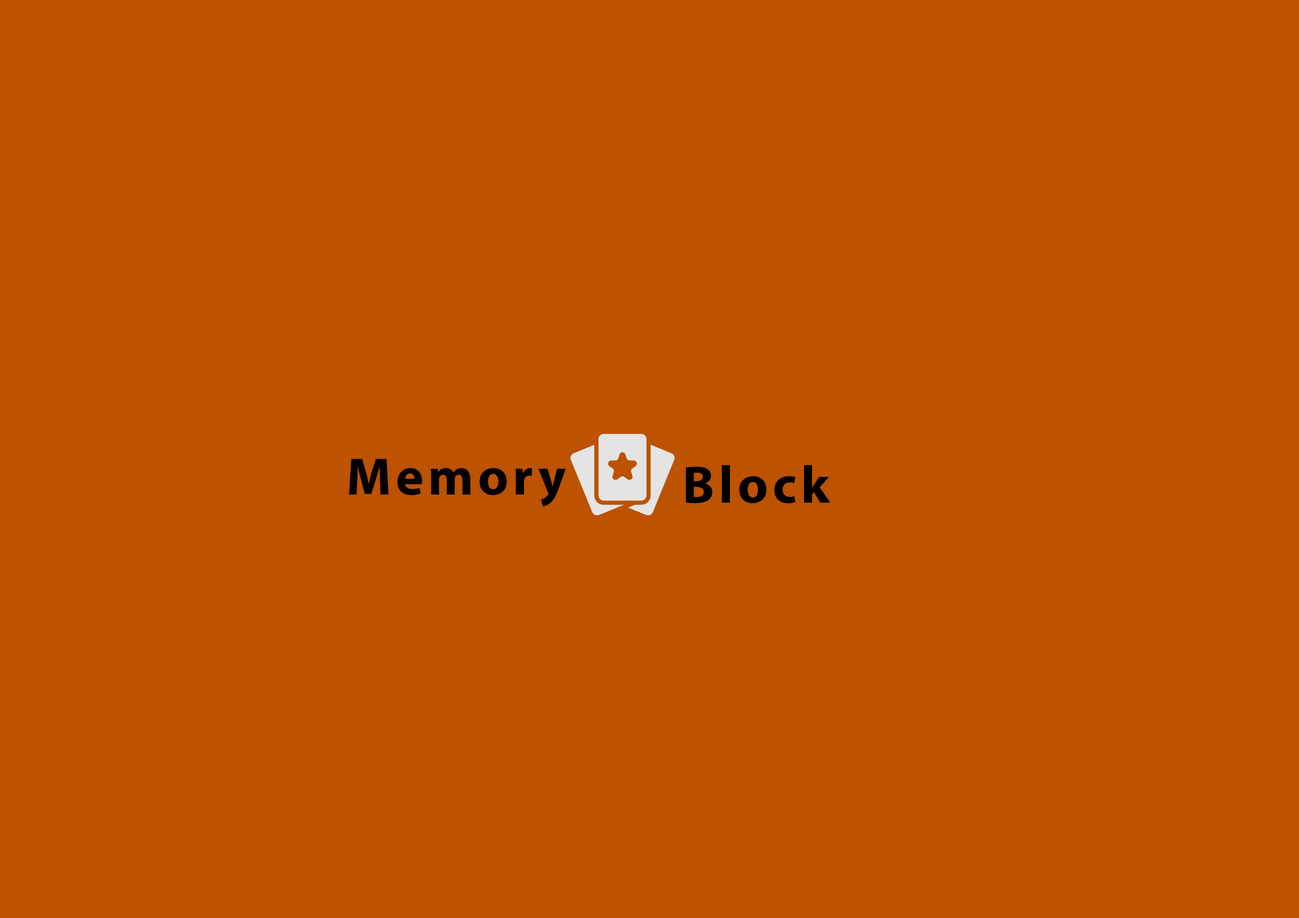
<style>
.page{position:relative;width:1299px;height:918px;background:#bd5200}
.page>*{position:absolute;margin:0}
.t1{font:74px "MyriadArabic-Bold";letter-spacing:0.06em;color:#000000}
</style>
<div class="page">
<p class="t1" style="left:349px;top:459px;width:217px;height:47px">Memory</p>
<p class="t1" style="left:686px;top:465px;width:144px;height:39px">Block</p>
</div>
